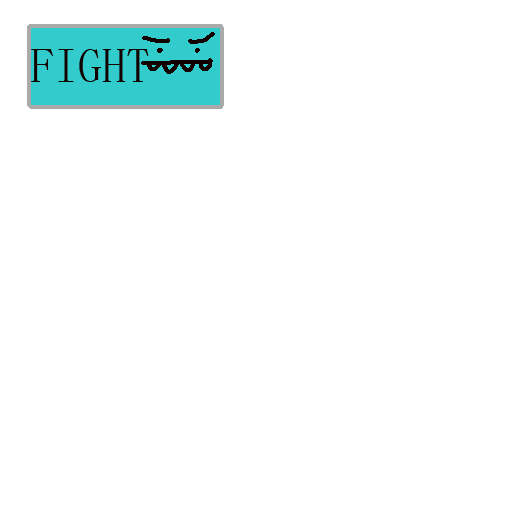
<style>
.page{position:relative;width:512px;height:512px;background:#ffffff}
.page>*{position:absolute;margin:0}
.t1{font:48px "SimSun";color:#110000}
</style>
<div class="page">
<p class="t1" style="left:31px;top:49px;width:118px;height:33px">FIGHT</p>
</div>
